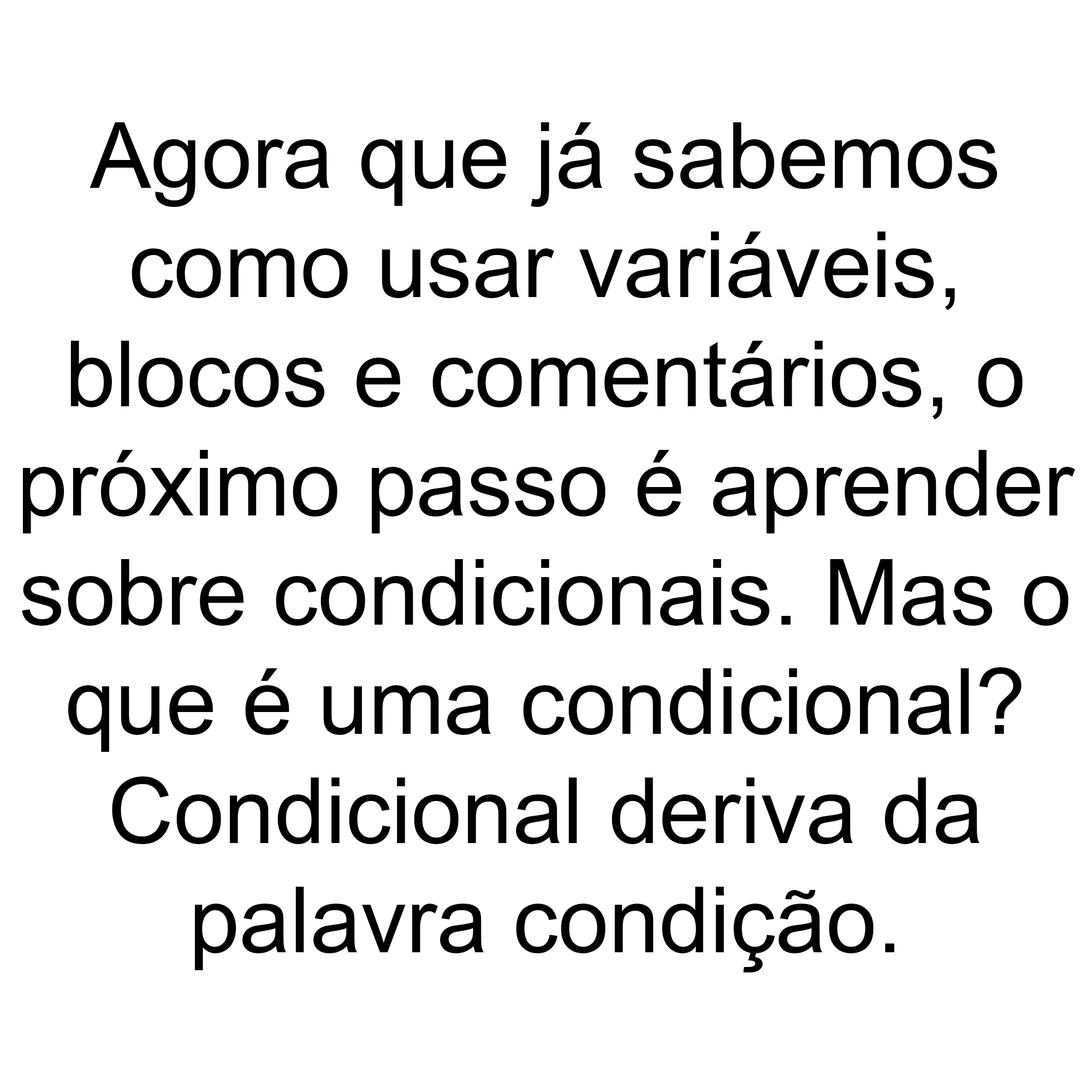
<style>
.page{position:relative;width:1092px;height:1092px;background:#ffffff}
.page>*{position:absolute;margin:0}
.t1{font:91px "ArialMT";color:#000000}
</style>
<div class="page">
<p class="t1" style="left:22px;top:122px;width:1053px;height:850px;text-align:center">Agora que já sabemos<br>como usar variáveis,<br>blocos e comentários, o<br>próximo passo é aprender<br>sobre condicionais. Mas o<br>que é uma condicional?<br>Condicional deriva da<br>palavra condição.</p>
</div>
